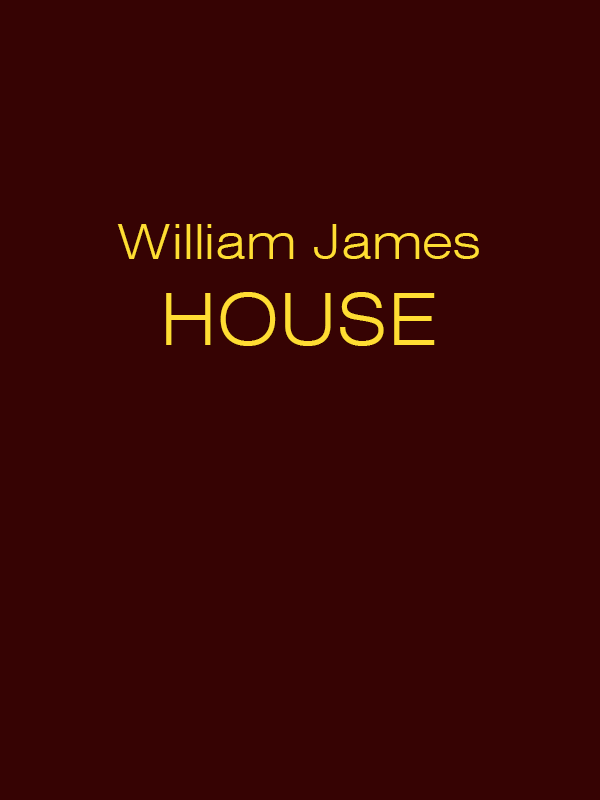
<style>
.page{position:relative;width:600px;height:800px;background:#360303}
.page>*{position:absolute;margin:0}
.t1{font:48px "Swiss721BT-LightExtended";color:#ffdd33}
.t2{font:72px "Swiss721BT-LightExtended";color:#ffdd33}
</style>
<div class="page">
<p class="t1" style="left:117px;top:224px;width:362px;height:122px;text-align:center">William James<br><span class="t2">HOUSE</span></p>
</div>
